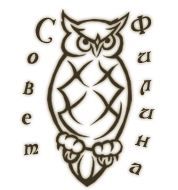
<style>
.page{position:relative;width:178px;height:190px;background:#ffffff}
.page>*{position:absolute;margin:0}
.t1{font:22.2px "Arlekino";color:#3c3222;font-style:italic}
</style>
<div class="page">
<p class="t1" style="left:22px;top:17px;width:34px;height:139px">С<br>о<br>в<br>е<br>т</p>
<p class="t1" style="left:129px;top:15px;width:26px;height:161px;rotate:4deg">Ф<br>и<br>л<br>и<br>н<br>а</p>
</div>
